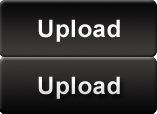
<style>
.page{position:relative;width:157px;height:114px}
.page>*{position:absolute;margin:0}
.t1{font:24px "Arial-BoldMT";letter-spacing:0.025em;color:#ffffff}
.t2{font:24px "Arial-BoldMT";letter-spacing:0.025em;color:#ebebeb}
</style>
<div class="page">
<p class="t1" style="left:38px;top:19px;width:82px;height:23px">Upload</p>
<p class="t2" style="left:38px;top:76px;width:82px;height:23px">Upload</p>
</div>
